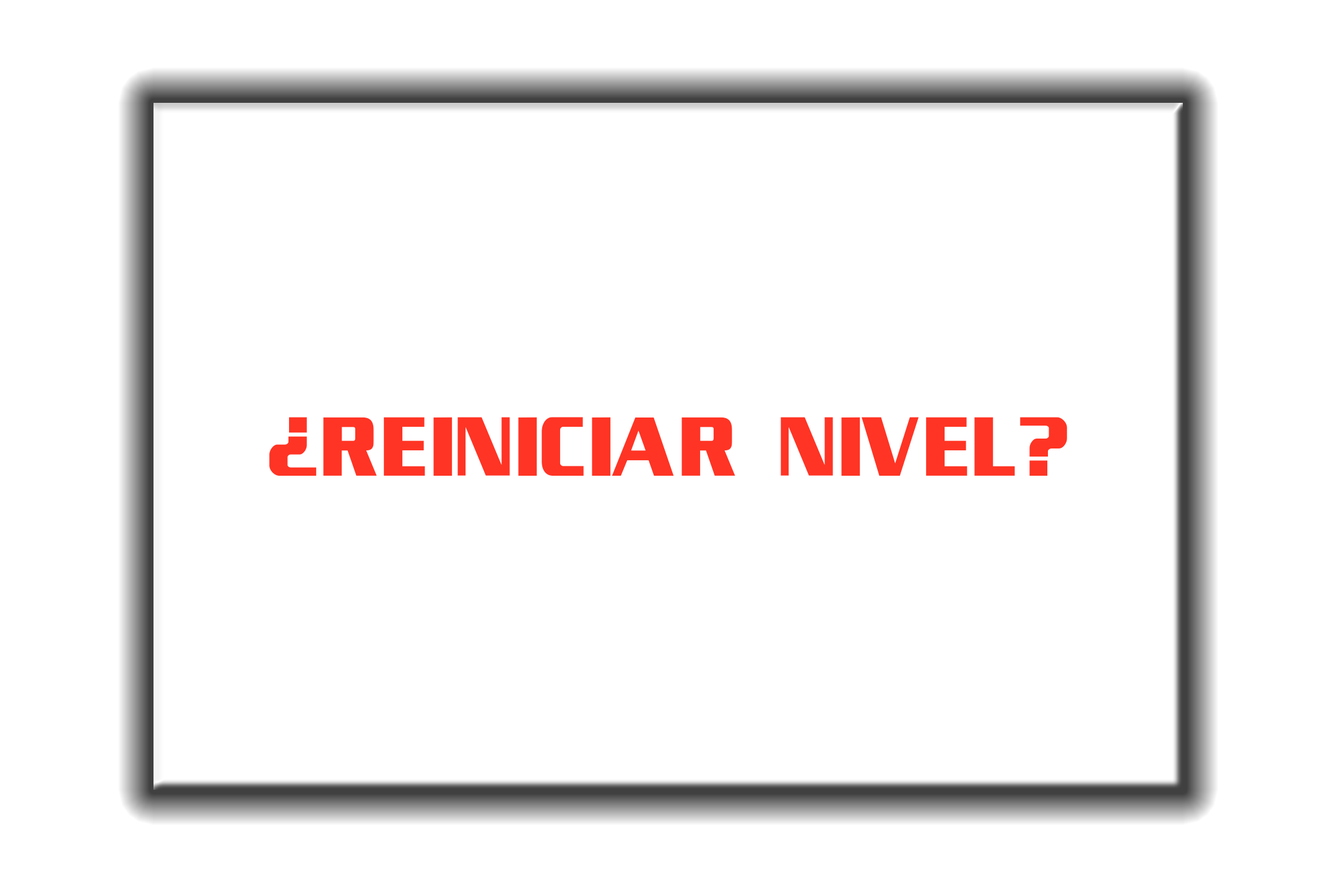
<style>
.page{position:relative;width:1337px;height:892px;background:#ffffff}
.page>*{position:absolute;margin:0}
.t1{font:83.4px "EnterSansmanBold";letter-spacing:0.01em;color:#ff3424;scale:0.9 1}
</style>
<div class="page">
<p class="t1" style="left:269px;top:417px;width:798px;height:59px">¿REINICIAR NIVEL?</p>
</div>
